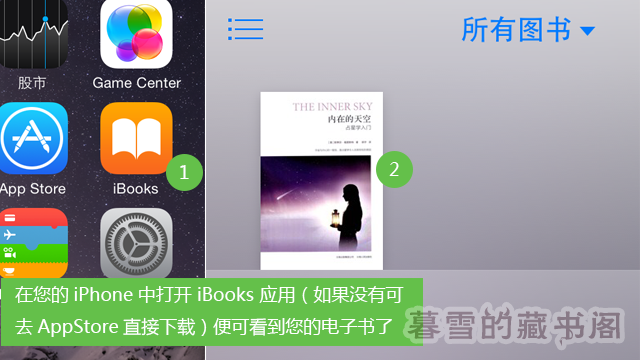
<style>
.page{position:relative;width:640px;height:360px}
.page>*{position:absolute;margin:0}
.t1{font:18px "MicrosoftYaHei";color:#ffffff}
.t2{font:36px "FZHLJW--GB1-0";color:#897b87}
</style>
<div class="page">
<p class="t1" style="left:180px;top:165px;width:9px;height:14px">1</p>
<p class="t1" style="left:389px;top:162px;width:10px;height:14px">2</p>
<p class="t1" style="left:15px;top:285px;width:389px;height:52px">在您的iPhone中打开 iBooks 应用（如果没有可<br>去AppStore直接下载）便可看到您的电子书了</p>
<p class="t2" style="left:407px;top:306px;width:213px;height:40px">暮雪的藏书阁</p>
</div>
